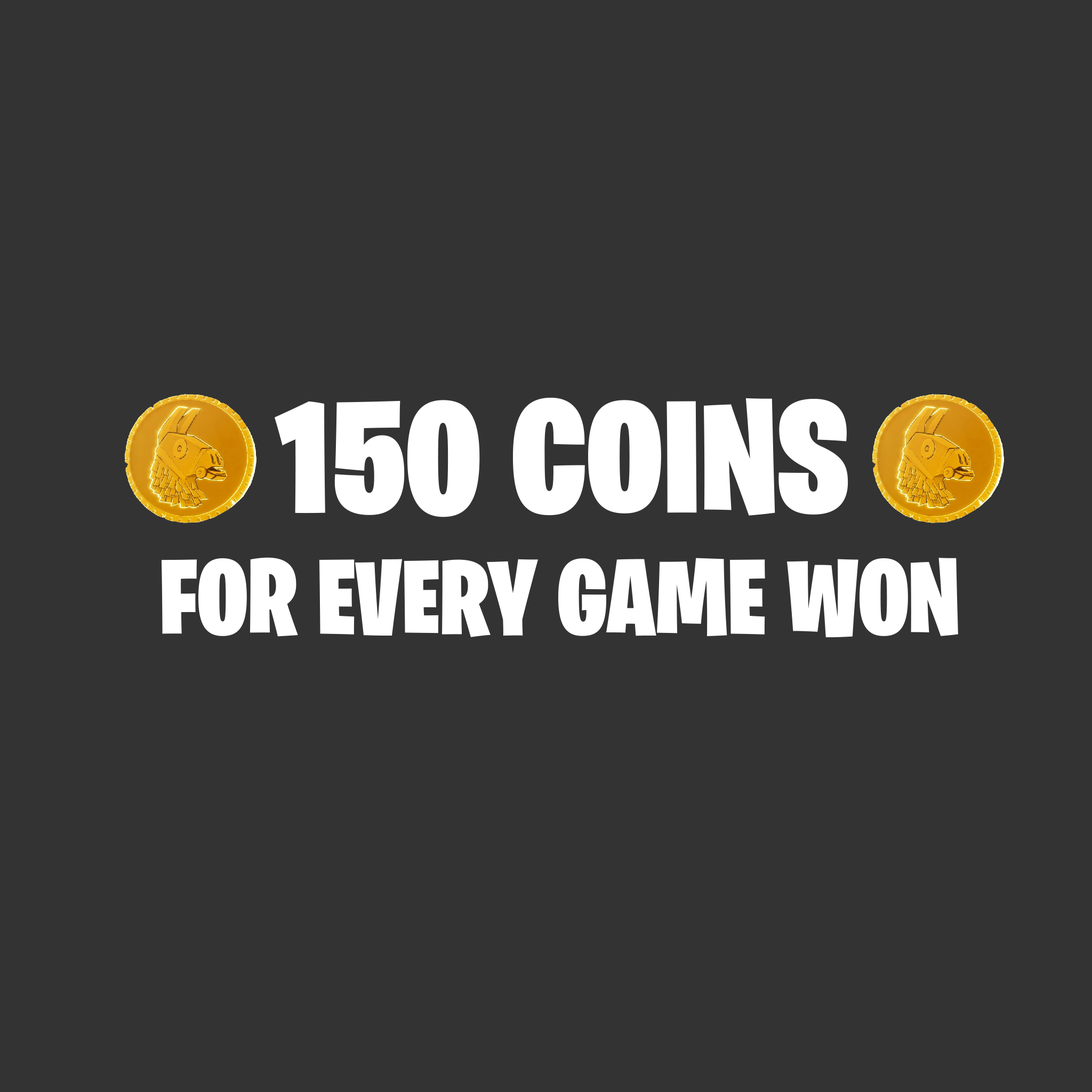
<style>
.page{position:relative;width:1092px;height:1092px;background:#333333}
.page>*{position:absolute;margin:0}
.t1{font:160px "BurbankBigCondensed-Black";color:#ffffff}
.t2{font:106.6px "BurbankBigCondensed-Black";color:#ffffff}
</style>
<div class="page">
<p class="t1" style="left:275px;top:397px;width:573px;height:120px">150 COINS</p>
<p class="t2" style="left:162px;top:557px;width:796px;height:81px">FOR EVERY GAME WON</p>
</div>
